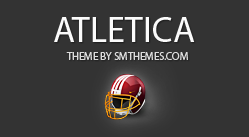
<style>
.page{position:relative;width:249px;height:137px;background:#333333}
.page>*{position:absolute;margin:0}
.t1{font:11px/18px "MyriadPro-Regular";color:#dcdcdc;text-transform:uppercase}
.t2{font:36px/24px "MyriadPro-Regular";color:#fbfbfb;text-transform:uppercase}
</style>
<div class="page">
<p class="t1" style="left:54px;top:17px;width:141px;height:43px;text-align:center"><span class="t2">Atletica <br></span>theme by SMThemes.com</p>
</div>
